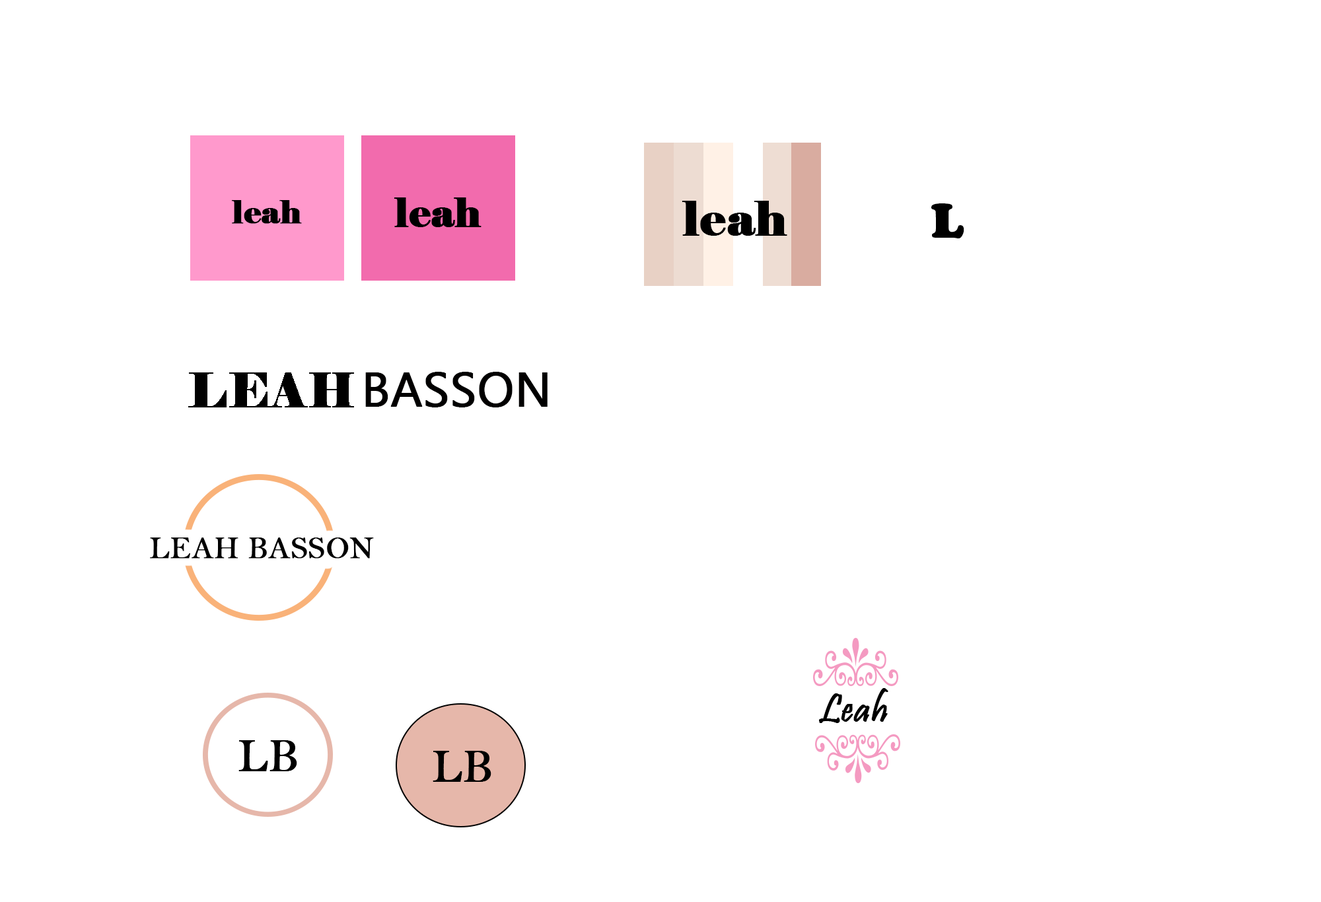
<style>
.page{position:relative;width:1321px;height:902px;background:#ffffff}
.page>*{position:absolute;margin:0}
.t1{font:39.6px "Elephant-Regular";color:#000000;font-weight:bold}
.t2{font:31.7px "Elephant-Regular";color:#000000;font-weight:bold}
.t3{font:47.6px "Elephant-Regular";color:#000000;font-weight:bold}
.t4{font:47.6px "CooperBlackStd";color:#000000;font-weight:bold}
.t5{font:48.2px "LeelawadeeUI";color:#010000;font-weight:bold}
.t6{font:31.7px "BellMT";color:#000000;font-weight:bold}
.t7{font:39.6px "Pristina-Regular";color:#000000;font-weight:bold}
.t8{font:47.6px "BellMT";color:#000000;font-weight:bold}
</style>
<div class="page">
<p class="t1" style="left:394px;top:198px;width:88px;height:29px">leah</p>
<p class="t2" style="left:232px;top:200px;width:70px;height:24px">leah</p>
<p class="t3" style="left:682px;top:201px;width:106px;height:35px">leah</p>
<p class="t4" style="left:932px;top:203px;width:33px;height:35px">L</p>
<p class="t5" style="left:365px;top:372px;width:183px;height:36px">BASSON</p>
<p class="t6" style="left:150px;top:538px;width:224px;height:21px">LEAH BASSON</p>
<p class="t7" style="left:819px;top:688px;width:70px;height:35px">Leah</p>
<p class="t8" style="left:238px;top:741px;width:59px;height:31px">LB</p>
<p class="t8" style="left:433px;top:751px;width:59px;height:31px">LB</p>
</div>
